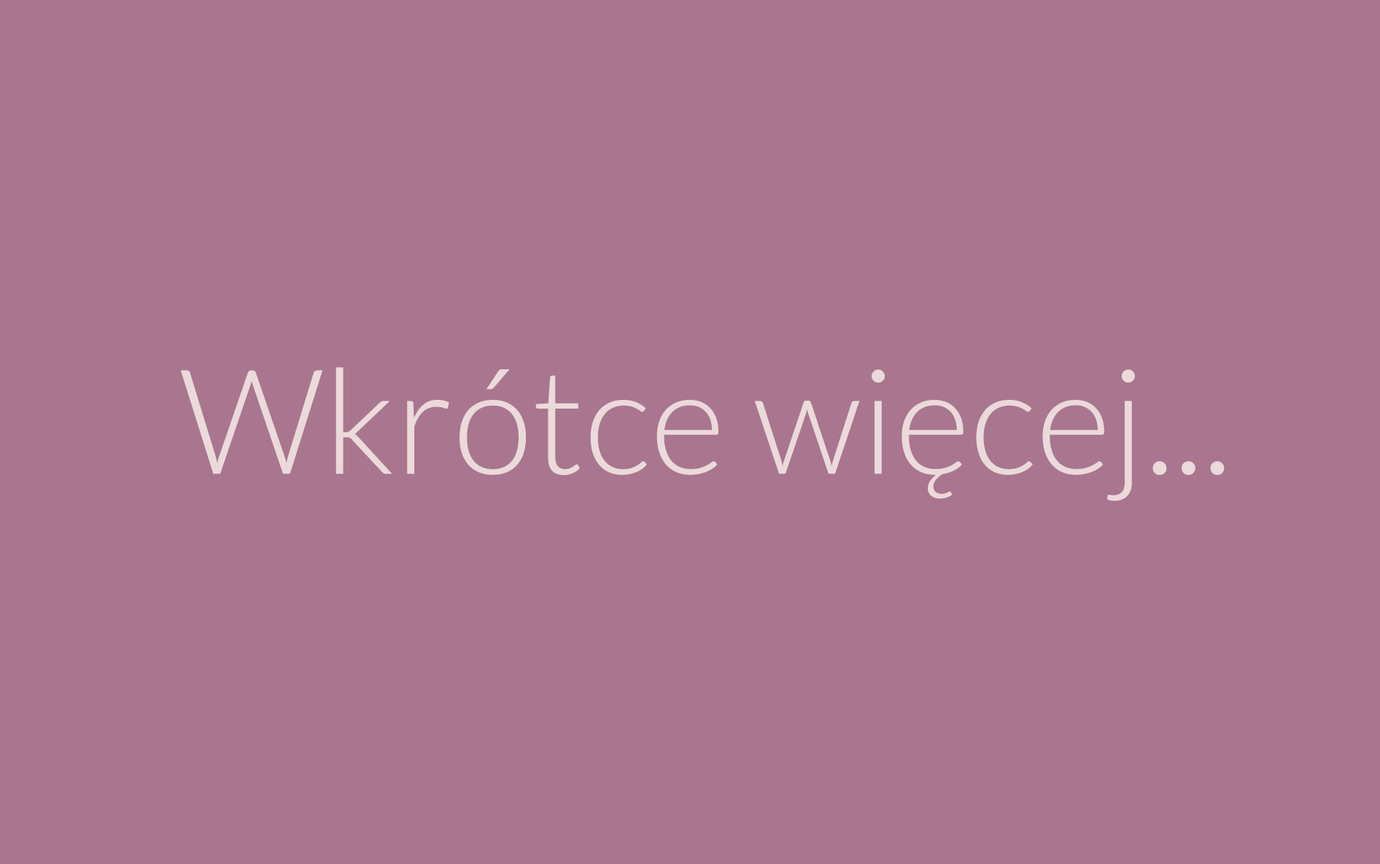
<style>
.page{position:relative;width:1380px;height:864px;background:#aa758f}
.page>*{position:absolute;margin:0}
.t1{font:145.9px "Lato-Light";color:#eadada}
</style>
<div class="page">
<p class="t1" style="left:181px;top:367px;width:1044px;height:134px">Wkrótce więcej...</p>
</div>
